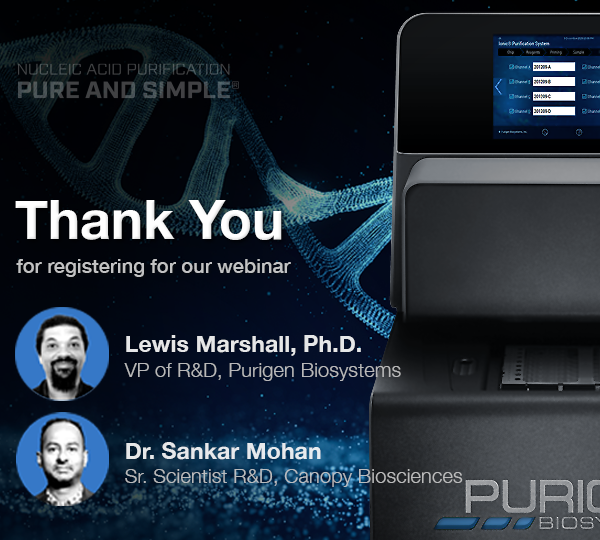
<style>
.page{position:relative;width:600px;height:540px}
.page>*{position:absolute;margin:0}
.t1{font:54px "HelveticaNeue-Bold";color:#ffffff}
.t2{font:20px "HelveticaNeue-Medium";color:#c2c2c3}
.t3{font:20px/24.7px "HelveticaNeue-Light";letter-spacing:0.005em;color:#e6e6e7}
.t4{font:23.1px/24.7px "HelveticaNeue-Bold";color:#e6e6e7}
.t5{font:20px/24.7px "HelveticaNeue-Light";letter-spacing:0.005em;color:#cccccc}
.t6{font:23.1px/24.7px "HelveticaNeue-Bold";color:#ffffff}
</style>
<div class="page">
<p class="t1" style="left:15px;top:200px;width:267px;height:40px">Thank You</p>
<p class="t2" style="left:16px;top:259px;width:275px;height:18px">for registering for our webinar</p>
<p class="t3" style="left:124px;top:335px;width:277px;height:46px"><span class="t4">Lewis Marshall, Ph.D.<br></span>VP of R&amp;D, Purigen Biosystems</p>
<p class="t5" style="left:125px;top:442px;width:338px;height:45px;opacity:0.85"><span class="t6">Dr. Sankar Mohan<br></span>Sr. Scientist R&amp;D, Canopy Biosciences</p>
</div>
